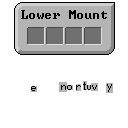
<style>
.page{position:relative;width:128px;height:128px;background:#ffffff}
.page>*{position:absolute;margin:0}
.t1{font:12px "Terminal";color:#000000}
</style>
<div class="page">
<p class="t1" style="left:21px;top:10px;width:86px;height:9px">Lower Mount</p>
</div>
